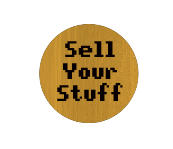
<style>
.page{position:relative;width:173px;height:149px;background:#ffffff}
.page>*{position:absolute;margin:0}
.t1{font:18px "pixelmix-bold";color:#080000}
</style>
<div class="page">
<p class="t1" style="left:57px;top:41px;width:66px;height:60px;text-align:center">Sell<br>Your<br>Stuff</p>
</div>
